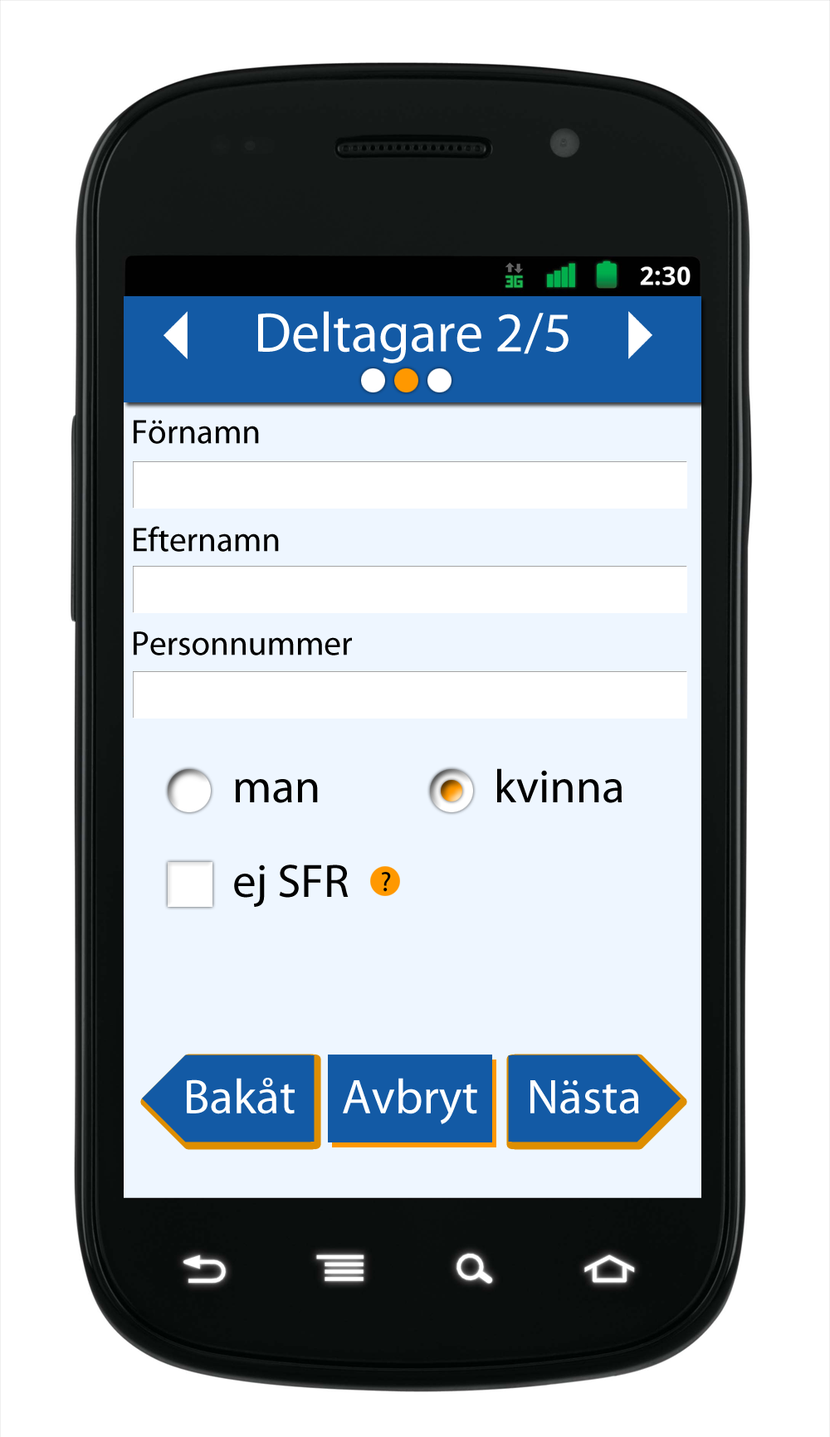
<style>
.page{position:relative;width:830px;height:1437px;background:#ffffff}
.page>*{position:absolute;margin:0}
.t1{font:56.1px "MyriadPro-Regular";color:#ffffff}
.t2{font:34.2px "MyriadPro-Regular";color:#000000}
.t3{font:47.1px "MyriadPro-Regular";color:#000000}
.t4{font:49px "MyriadPro-Regular";color:#ffffff}
</style>
<div class="page">
<p class="t1" style="left:258px;top:311px;width:310px;height:52px">Deltagare 2/5</p>
<p class="t2" style="left:134px;top:420px;width:125px;height:24px">Förnamn</p>
<p class="t2" style="left:134px;top:526px;width:145px;height:26px">Efternamn</p>
<p class="t2" style="left:134px;top:631px;width:218px;height:24px">Personnummer</p>
<p class="t3" style="left:497px;top:768px;width:125px;height:35px">kvinna</p>
<p class="t3" style="left:235px;top:779px;width:83px;height:24px">man</p>
<p class="t3" style="left:234px;top:865px;width:114px;height:42px">ej SFR</p>
<p class="t4" style="left:187px;top:1078px;width:108px;height:36px">Bakåt</p>
<p class="t4" style="left:530px;top:1080px;width:109px;height:34px">Nästa</p>
</div>
